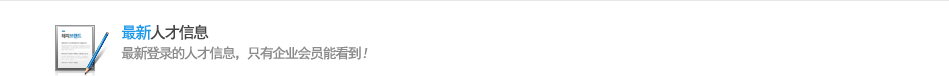
<style>
.page{position:relative;width:949px;height:76px;background:#ffffff}
.page>*{position:absolute;margin:0}
.t1{font:16px "SimHei";letter-spacing:-0.1em;color:#454545}
.t2{font:16px "SimHei";letter-spacing:-0.1em;color:#1b97eb}
.t3{font:14px "SimHei";letter-spacing:-0.1em;color:#8b8b8b}
.t4{font:14px "SimHei";letter-spacing:-0.1em;color:#8b8b8b;font-style:italic}
</style>
<div class="page">
<p class="t1" style="left:122px;top:24px;width:87px;height:16px"><span class="t2">最新</span>人才信息</p>
<p class="t3" style="left:121px;top:46px;width:247px;height:15px">最新登录的人才信息，只有企业会员能看到<span class="t4">！</span></p>
</div>
